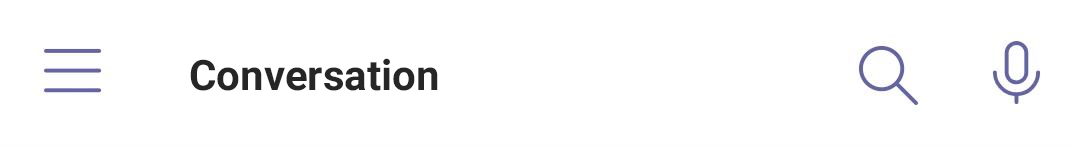
<style>
.page{position:relative;width:1080px;height:147px;background:#ffffff}
.page>*{position:absolute;margin:0}
.t1{font:42px "Roboto-Bold";color:#262626}
</style>
<div class="page">
<p class="t1" style="left:190px;top:58px;width:248px;height:33px">Conversation</p>
</div>
